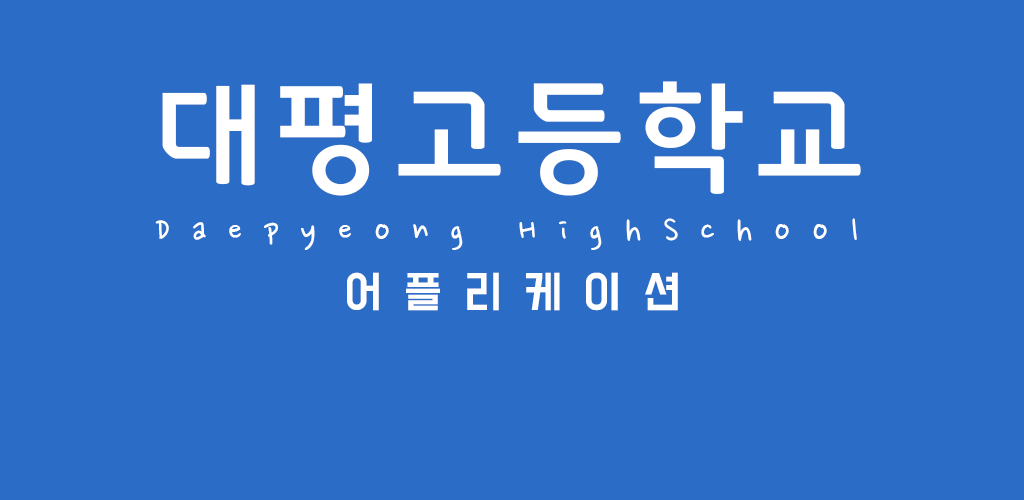
<style>
.page{position:relative;width:1024px;height:500px;background:#2b6dc6}
.page>*{position:absolute;margin:0}
.t1{font:118.8px "GodoM";letter-spacing:0.1em;color:#ffffff}
.t2{font:39.6px "NanumPen";letter-spacing:0.55em;color:#ffffff}
.t3{font:39.6px "BMDoHyeon-OTF";letter-spacing:0.55em;color:#ffffff}
</style>
<div class="page">
<p class="t1" style="left:162px;top:81px;width:699px;height:115px">대평고등학교</p>
<p class="t2" style="left:155px;top:218px;width:702px;height:32px">Daepyeong HighSchool</p>
<p class="t3" style="left:347px;top:272px;width:331px;height:39px">어플리케이션</p>
</div>
